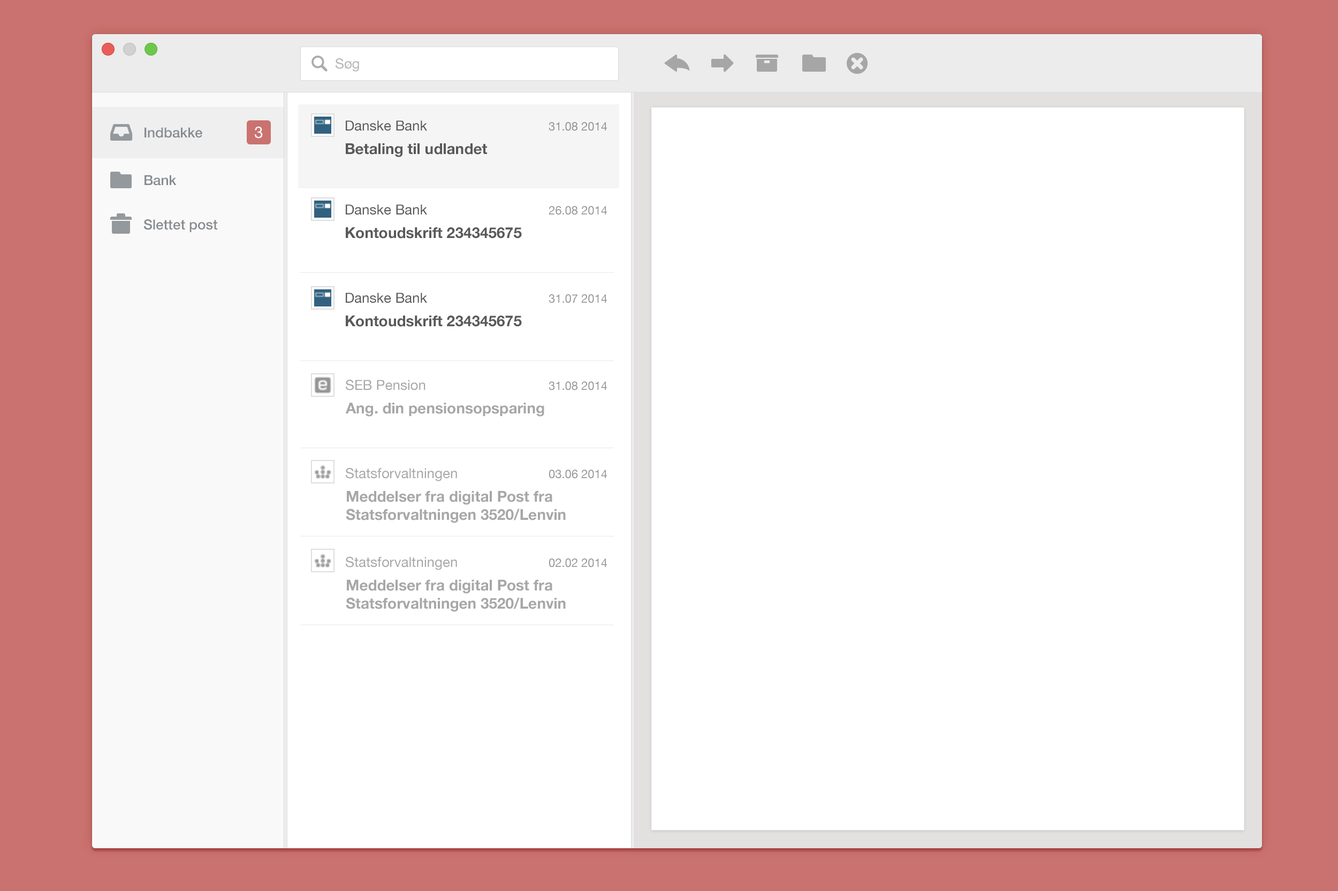
<style>
.page{position:relative;width:1338px;height:891px;background:#ffffff}
.page>*{position:absolute;margin:0}
.t1{font:13.9px "HelveticaNeue";color:#b2b5b9}
.t2{font:13.9px "HelveticaNeue";color:#595959}
.t3{font:11.8px "HelveticaNeue";color:#929292}
.t4{font:13.9px "HelveticaNeue-Medium";color:#888c90}
.t5{font:16.1px "HelveticaNeue";color:#f9f9f9}
.t6{font:15px "HelveticaNeue-Bold";color:#595959}
.t7{font:11.8px "HelveticaNeue";color:#969696}
.t8{font:13.9px "HelveticaNeue";color:#a7a7a7}
.t9{font:15px "HelveticaNeue-Bold";color:#a7a7a7}
.t10{font:15px/18.2px "HelveticaNeue-Bold";color:#a7a7a7}
</style>
<div class="page">
<p class="t1" style="left:335px;top:58px;width:24px;height:14px">Søg</p>
<p class="t2" style="left:346px;top:120px;width:81px;height:11px">Danske Bank</p>
<p class="t3" style="left:548px;top:122px;width:59px;height:9px">31.08 2014</p>
<p class="t4" style="left:144px;top:127px;width:58px;height:11px">Indbakke</p>
<p class="t5" style="left:255px;top:126px;width:8px;height:13px">3</p>
<p class="t6" style="left:346px;top:143px;width:141px;height:14px">Betaling til udlandet</p>
<p class="t4" style="left:144px;top:175px;width:33px;height:11px">Bank</p>
<p class="t2" style="left:346px;top:204px;width:81px;height:11px">Danske Bank</p>
<p class="t7" style="left:548px;top:206px;width:59px;height:9px">26.08 2014</p>
<p class="t4" style="left:143px;top:219px;width:75px;height:13px">Slettet post</p>
<p class="t6" style="left:346px;top:227px;width:176px;height:12px">Kontoudskrift 234345675</p>
<p class="t2" style="left:346px;top:293px;width:81px;height:10px">Danske Bank</p>
<p class="t7" style="left:548px;top:294px;width:59px;height:9px">31.07 2014</p>
<p class="t6" style="left:346px;top:316px;width:176px;height:11px">Kontoudskrift 234345675</p>
<p class="t8" style="left:346px;top:380px;width:79px;height:11px">SEB Pension</p>
<p class="t7" style="left:548px;top:382px;width:59px;height:9px">31.08 2014</p>
<p class="t9" style="left:345px;top:403px;width:199px;height:14px">Ang. din pensionsopsparing</p>
<p class="t8" style="left:346px;top:468px;width:111px;height:14px">Statsforvaltningen</p>
<p class="t7" style="left:549px;top:470px;width:58px;height:9px">03.06 2014</p>
<p class="t10" style="left:346px;top:491px;width:220px;height:32px">Meddelser fra digital Post fra<br>Statsforvaltningen 3520/Lenvin</p>
<p class="t8" style="left:346px;top:557px;width:111px;height:13px">Statsforvaltningen</p>
<p class="t7" style="left:549px;top:559px;width:58px;height:9px">02.02 2014</p>
<p class="t10" style="left:346px;top:580px;width:220px;height:32px">Meddelser fra digital Post fra<br>Statsforvaltningen 3520/Lenvin</p>
</div>
